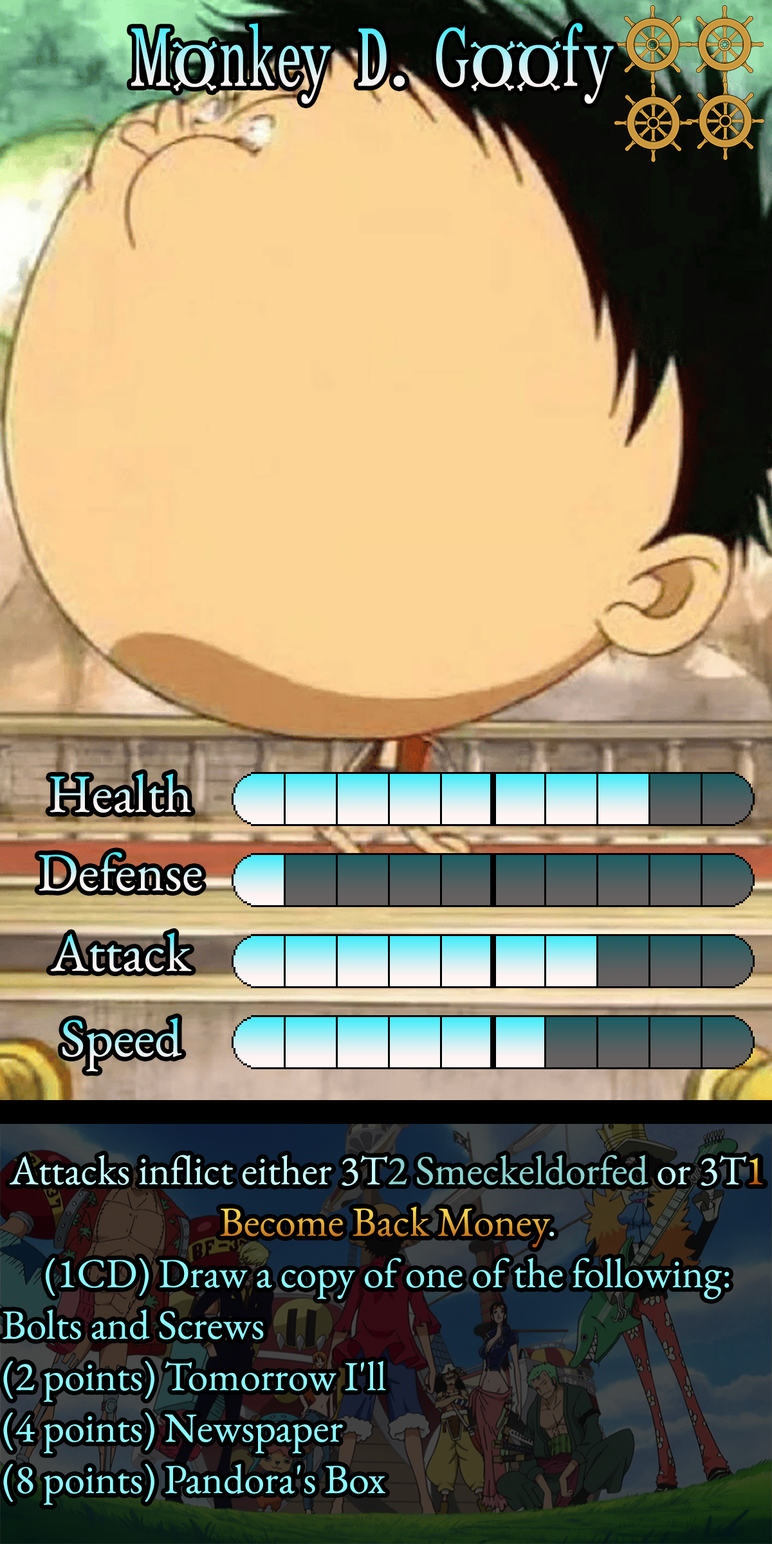
<style>
.page{position:relative;width:772px;height:1544px}
.page>*{position:absolute;margin:0}
.t1{font:141.6px "ONEPIECE"}
.t2{font:92.7px "EBGaramond-Regular"}
.t3{font:70.8px/51.5px "EBGaramond-Regular";color:#8cf9ff}
.t4{font:70.8px/51.5px "EBGaramond-Regular";color:#c5fcff}
.t5{font:70.8px/51.5px "EBGaramond-Regular";color:#8ad2cf}
.t6{font:70.8px/51.5px "EBGaramond-Regular";color:#f8da52}
.t7{font:70.8px "EBGaramond-Regular"}
</style>
<div class="page">
<p class="t1" style="left:131px;top:23px;width:483px;height:81px">Monkey D. Goofy</p>
<p class="t2" style="left:50px;top:773px;width:141px;height:40px">Health</p>
<p class="t2" style="left:39px;top:852px;width:163px;height:40px">Defense</p>
<p class="t2" style="left:50px;top:932px;width:142px;height:40px">Attack</p>
<p class="t2" style="left:62px;top:1018px;width:120px;height:54px">Speed</p>
<p class="t3" style="left:3px;top:1155px;width:761px;height:351px;text-align:center"><span class="t4">Attacks inflict either 3T</span><span class="t5">2 Smeckeldorfed </span><span class="t4">or 3T</span><span class="t6">1 Become Back Money</span><span class="t4">.<br></span>(1CD) Draw a copy of one of the following:<br>Bolts and Screws<br>(2 points) Tomorrow I'll<br>(4 points) Newspaper<br>(8 points) Pandora's Box</p>
<p class="t7" style="left:749px;top:1158px;width:14px;height:27px">1</p>
<p class="t7" style="left:220px;top:1206px;width:331px;height:42px">Become Back Money</p>
</div>
